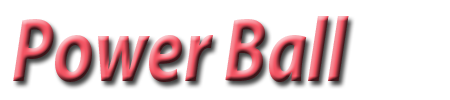
<style>
.page{position:relative;width:450px;height:100px;background:#ffffff}
.page>*{position:absolute;margin:0}
.t1{font:92px "MyriadPro-BoldIt";scale:0.79 1}
</style>
<div class="page">
<p class="t1" style="left:13px;top:16px;width:336px;height:66px">Power Ball</p>
</div>
